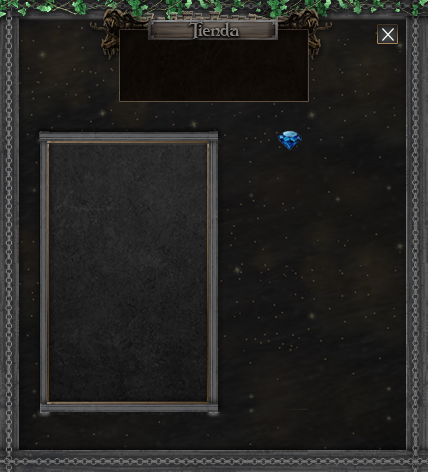
<style>
.page{position:relative;width:428px;height:472px}
.page>*{position:absolute;margin:0}
.t1{font:18.1px "Folkard";color:#88837e}
</style>
<div class="page">
<p class="t1" style="left:188px;top:21px;width:51px;height:18px">Tienda</p>
</div>
